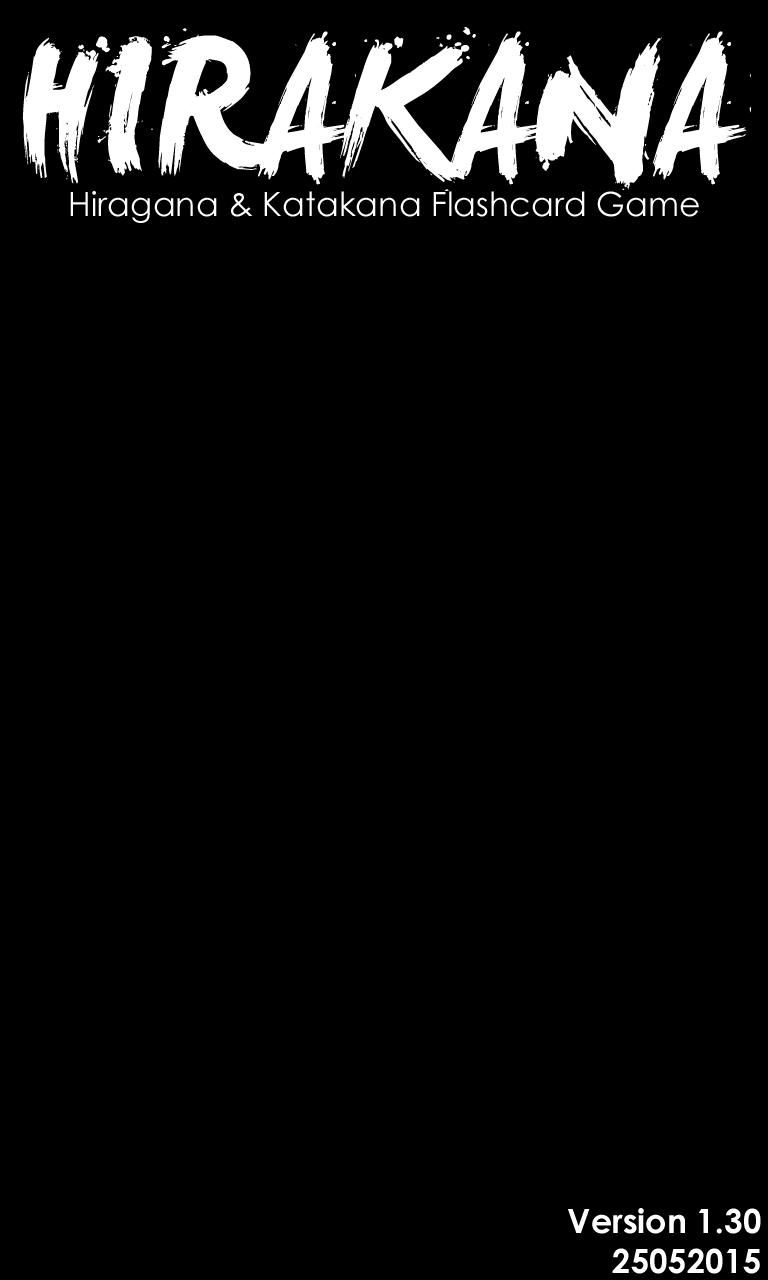
<style>
.page{position:relative;width:768px;height:1280px;background:#000000}
.page>*{position:absolute;margin:0}
.t1{font:175px "LeviReBrushed";color:#ffffff}
.t2{font:33.3px "CenturyGothic";color:#ffffff}
.t3{font:33.3px "CenturyGothic-Bold";color:#ffffff}
</style>
<div class="page">
<p class="t1" style="left:22px;top:26px;width:730px;height:165px">HIRAKANA</p>
<p class="t2" style="left:70px;top:191px;width:629px;height:32px">Hiragana &amp; Katakana Flashcard Game</p>
<p class="t3" style="left:568px;top:1208px;width:193px;height:66px;text-align:right">Version 1.30<br>25052015</p>
</div>
